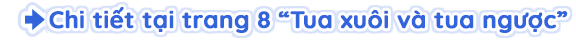
<style>
.page{position:relative;width:576px;height:42px;background:#ffffff}
.page>*{position:absolute;margin:0}
.t1{font:24px "Quicksand-Bold";color:#3264dc;font-weight:bold}
</style>
<div class="page">
<p class="t1" style="left:49px;top:7px;width:519px;height:26px">Chi tiết tại trang 8 “Tua xuôi và tua ngược”</p>
</div>
